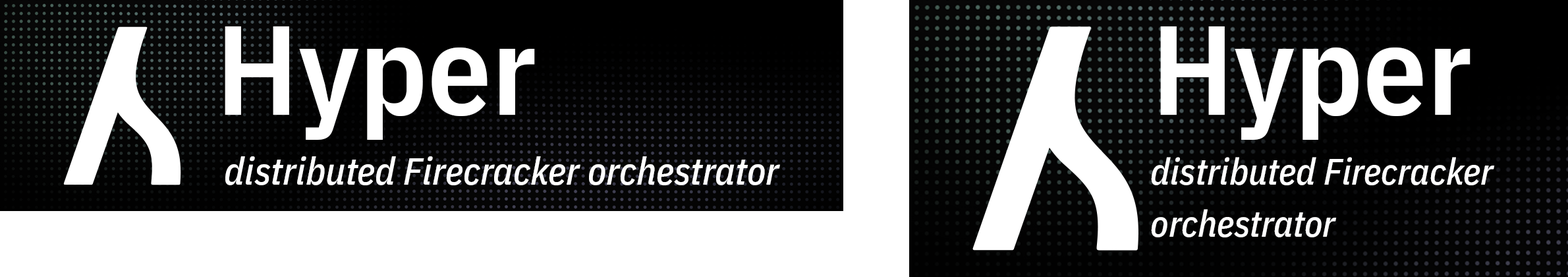
<style>
.page{position:relative;width:1568px;height:277px;background:#ffffff}
.page>*{position:absolute;margin:0}
.t1{font:126.5px "IBMPlexSansCondensed-SemiBold";color:#ffffff}
.t2{font:38.2px "IBMPlexSansCondensed-MediumItalic";color:#ffffff}
.t3{font:36.9px "IBMPlexSansCondensed-MediumItalic";color:#ffffff}
</style>
<div class="page">
<p class="t1" style="left:225px;top:26px;width:310px;height:114px">Hyper</p>
<p class="t1" style="left:1160px;top:26px;width:310px;height:114px">Hyper</p>
<p class="t2" style="left:225px;top:156px;width:555px;height:29px">distributed Firecracker orchestrator</p>
<p class="t3" style="left:1151px;top:157px;width:344px;height:80px">distributed Firecracker<br>orchestrator</p>
</div>
